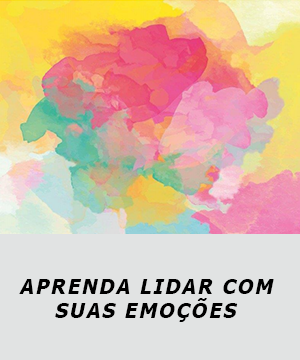
<style>
.page{position:relative;width:300px;height:360px;background:#e1e3e3}
.page>*{position:absolute;margin:0}
.t1{font:20.2px "Tahoma-Bold";letter-spacing:0.1em;color:#000000}
</style>
<div class="page">
<p class="t1" style="left:19px;top:279px;width:255px;height:43px;text-align:center">APRENDA LIDAR COM <br>SUAS EMOÇÕES</p>
</div>
